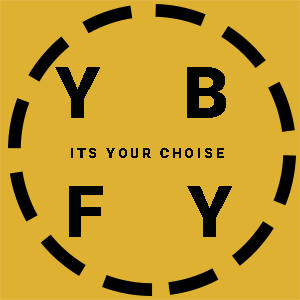
<style>
.page{position:relative;width:300px;height:300px;background:#deb133}
.page>*{position:absolute;margin:0}
.t1{font:72px "Roboto-Black";letter-spacing:0.2em;color:#000304;text-transform:uppercase}
.t2{font:14px "Roboto-Black";letter-spacing:0.2em;color:#000304;text-transform:uppercase}
</style>
<div class="page">
<p class="t1" style="left:55px;top:67px;width:45px;height:51px">Y</p>
<p class="t1" style="left:187px;top:67px;width:39px;height:51px">B</p>
<p class="t2" style="left:71px;top:148px;width:153px;height:10px">Its your choise</p>
<p class="t1" style="left:69px;top:186px;width:34px;height:51px">F</p>
<p class="t1" style="left:187px;top:186px;width:45px;height:51px">Y</p>
</div>
